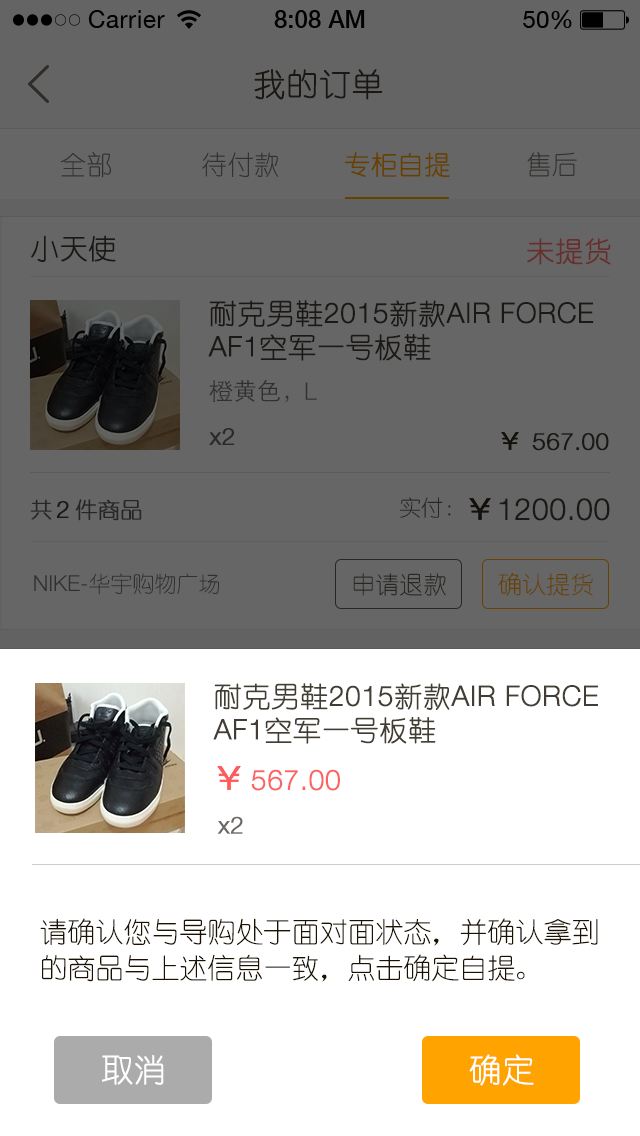
<style>
.page{position:relative;width:640px;height:1136px;background:#666666}
.page>*{position:absolute;margin:0}
.t1{font:32px "YouYuan";color:#1b1100;text-transform:uppercase;font-weight:bold}
.t2{font:26.4px "YouYuan";color:#31302e;text-transform:uppercase}
.t3{font:26.4px "YouYuan";color:#323231;text-transform:uppercase}
.t4{font:26.4px "YouYuan";color:#664100;text-transform:uppercase;font-weight:bold}
.t5{font:28px "YouYuan";color:#1b1100;text-transform:uppercase;font-weight:bold}
.t6{font:28px "YouYuan";color:#662e2c;text-transform:uppercase;font-weight:bold}
.t7{font:28px "HelveticaNeueLTPro-Lt";color:#1b1100;text-transform:uppercase;font-weight:bold}
.t8{font:24px "STHeitiSC-Light";color:#31302e;text-transform:uppercase}
.t9{font:24px "HelveticaNeueLTPro-Lt";color:#31302e;text-transform:uppercase}
.t10{font:24px "HelveticaNeueLTPro-Lt";color:#2c2a28;font-weight:bold}
.t11{font:24px "HelveticaNeueLTPro-Lt";color:#1b1100;text-transform:uppercase;font-weight:bold}
.t12{font:22px "YouYuan";color:#272623;text-transform:uppercase}
.t13{font:22px "YouYuan";color:#272623;text-transform:uppercase;font-weight:bold}
.t14{font:30px "HelveticaNeueLTPro-Lt";color:#1b1100;text-transform:uppercase;font-weight:bold}
.t15{font:22px "YouYuan";color:#31302e;text-transform:uppercase}
.t16{font:22px "HelveticaNeueLTPro-Lt";color:#31302e;text-transform:uppercase}
.t17{font:24px "YouYuan";color:#282724;text-transform:uppercase}
.t18{font:24px "YouYuan";color:#664100;text-transform:uppercase}
.t19{font:28px "HelveticaNeueLTPro-Lt";color:#433e34;text-transform:uppercase;font-weight:bold}
.t20{font:28px "YouYuan";color:#433e34;text-transform:uppercase;font-weight:bold}
.t21{font:28px "HelveticaNeueLTPro-Lt";color:#fc6464;text-transform:uppercase;font-weight:bold}
.t22{font:24px "HelveticaNeueLTPro-Lt";color:#6d6963;font-weight:bold}
.t23{font:28px/36px "YouYuan";color:#1b1100;text-transform:uppercase}
.t24{font:32px "YouYuan";color:#ffffff;text-transform:uppercase;font-weight:bold}
</style>
<div class="page">
<p class="t1" style="left:254px;top:69px;width:129px;height:31px;opacity:0.9">我的订单</p>
<p class="t2" style="left:60px;top:151px;width:51px;height:27px">全部</p>
<p class="t3" style="left:202px;top:152px;width:77px;height:25px">待付款</p>
<p class="t4" style="left:344px;top:152px;width:106px;height:26px">专柜自提</p>
<p class="t2" style="left:527px;top:152px;width:50px;height:25px">售后</p>
<p class="t5" style="left:31px;top:235px;width:85px;height:27px;opacity:0.9">小天使</p>
<p class="t6" style="left:527px;top:238px;width:84px;height:27px">未提货</p>
<p class="t7" style="left:208px;top:300px;width:386px;height:61px;opacity:0.9"><span class="t5">耐克男鞋</span>2015<span class="t5">新款</span>air force AF1<span class="t5">空军一号板鞋</span></p>
<p class="t8" style="left:209px;top:379px;width:80px;height:23px">橙黄色，</p>
<p class="t9" style="left:305px;top:382px;width:12px;height:18px">L</p>
<p class="t10" style="left:209px;top:428px;width:25px;height:17px">x2</p>
<p class="t11" style="left:532px;top:433px;width:77px;height:18px;opacity:0.9">567.00</p>
<p class="t12" style="left:399px;top:497px;width:52px;height:21px">实付：</p>
<p class="t13" style="left:30px;top:499px;width:22px;height:21px">共</p>
<p class="t11" style="left:56px;top:501px;width:13px;height:17px;opacity:0.9">2</p>
<p class="t13" style="left:75px;top:499px;width:67px;height:22px">件商品</p>
<p class="t14" style="left:499px;top:498px;width:111px;height:23px;opacity:0.9">1200.00</p>
<p class="t15" style="left:34px;top:573px;width:185px;height:22px"><span class="t16">NIKE-</span>华宇购物广场</p>
<p class="t17" style="left:353px;top:573px;width:93px;height:23px">申请退款</p>
<p class="t18" style="left:498px;top:573px;width:95px;height:23px">确认提货</p>
<p class="t19" style="left:213px;top:683px;width:385px;height:61px"><span class="t20">耐克男鞋</span>2015<span class="t20">新款</span>air force AF1<span class="t20">空军一号板鞋</span></p>
<p class="t21" style="left:251px;top:769px;width:89px;height:22px">567.00</p>
<p class="t22" style="left:217px;top:816px;width:26px;height:18px">x2</p>
<p class="t23" style="left:40px;top:918px;width:558px;height:64px">请确认您与导购处于面对面状态，并确认拿到的商品与上述信息一致，点击确定自提。</p>
<p class="t24" style="left:102px;top:1055px;width:62px;height:30px">取消</p>
<p class="t24" style="left:469px;top:1054px;width:65px;height:32px">确定</p>
</div>
